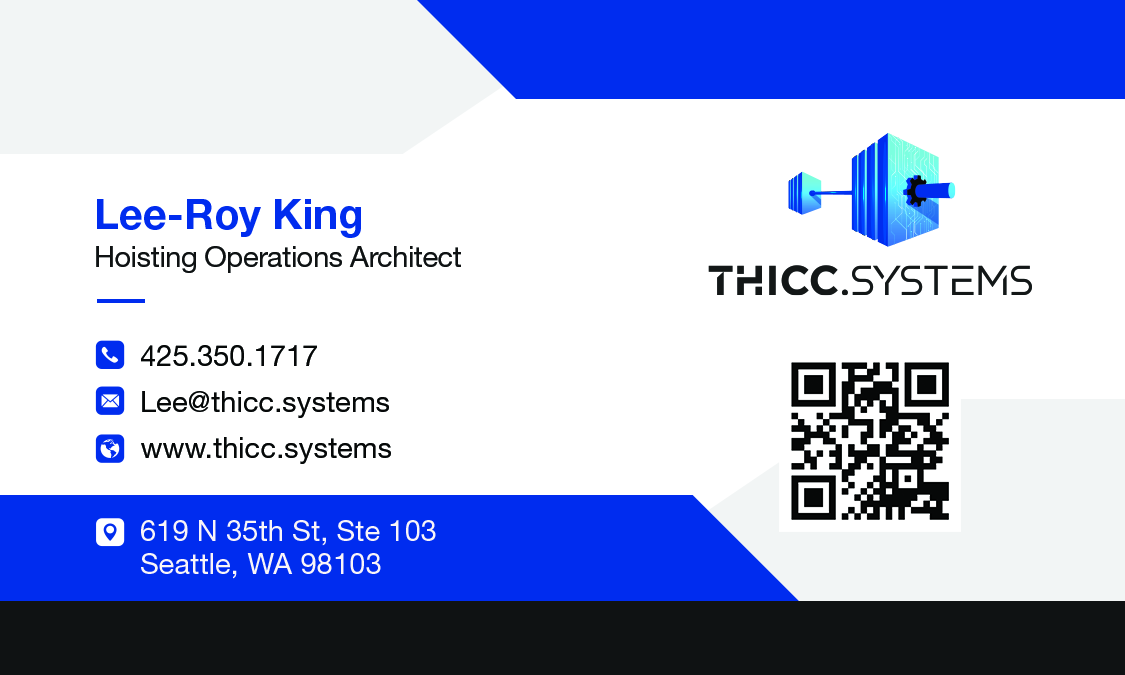
<style>
.page{position:relative;width:1125px;height:675px;background:#ffffff}
.page>*{position:absolute;margin:0}
.t1{font:41.7px "HelveticaNeueLTStd-Bd";color:#002cef}
.t2{font:29.2px "HelveticaNeueLTStd-Roman";letter-spacing:-0.02em;color:#0f1213}
.t3{font:29.2px/45.8px "HelveticaNeueLTStd-Roman";color:#060808}
.t4{font:29.2px/33.3px "HelveticaNeueLTStd-Roman";color:#f9f5f8}
</style>
<div class="page">
<p class="t1" style="left:97px;top:199px;width:264px;height:39px">Lee-Roy King</p>
<p class="t2" style="left:96px;top:246px;width:365px;height:27px">Hoisting Operations Architect</p>
<p class="t3" style="left:141px;top:345px;width:250px;height:119px">425.350.1717<br>Lee@thicc.systems<br>www.thicc.systems</p>
<p class="t4" style="left:141px;top:520px;width:295px;height:59px">619 N 35th St, Ste 103<br>Seattle, WA 98103</p>
</div>
